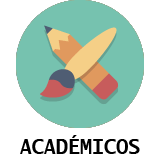
<style>
.page{position:relative;width:160px;height:160px;background:#ffffff}
.page>*{position:absolute;margin:0}
.t1{font:20px "LucidaSans-TypewriterBold";color:#000000;text-transform:uppercase}
</style>
<div class="page">
<p class="t1" style="left:20px;top:135px;width:120px;height:19px">académicos</p>
</div>
